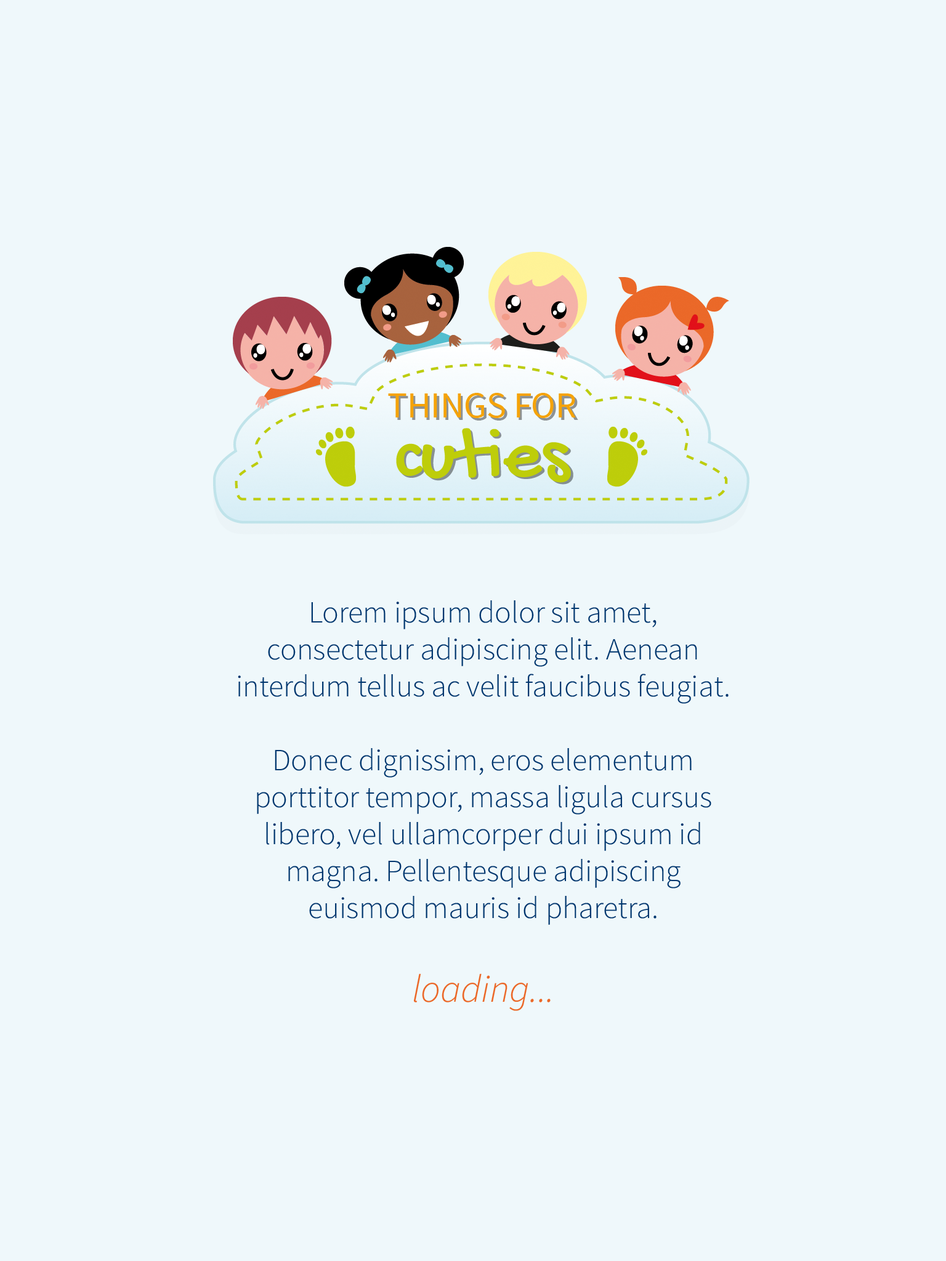
<style>
.page{position:relative;width:946px;height:1261px;background:#eff8fb}
.page>*{position:absolute;margin:0}
.t1{font:30.8px "SourceSansPro-Light";color:#00366e}
.t2{font:38.8px "SourceSansPro-LightIt";color:#eb6828}
</style>
<div class="page">
<p class="t1" style="left:238px;top:600px;width:490px;height:411px;text-align:center">Lorem ipsum dolor sit amet, consectetur adipiscing elit. Aenean interdum tellus ac velit faucibus feugiat.<br><br>Donec dignissim, eros elementum porttitor tempor, massa ligula cursus libero, vel ullamcorper dui ipsum id magna. Pellentesque adipiscing euismod mauris id pharetra.<br><br><span class="t2">loading...</span></p>
</div>
